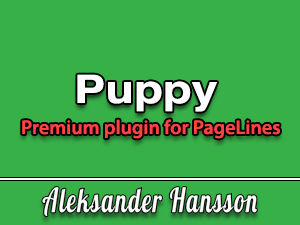
<style>
.page{position:relative;width:300px;height:225px;background:#37b048}
.page>*{position:absolute;margin:0}
.t1{font:39.2px "Helvetica-Bold";color:#ffffff;scale:1.2 1}
.t2{font:20px "MyriadPro-Semibold";color:#ff4443}
</style>
<div class="page">
<p class="t1" style="left:77px;top:74px;width:140px;height:38px">Puppy</p>
<p class="t2" style="left:22px;top:119px;width:258px;height:20px">Premium plugin for PageLines</p>
</div>
